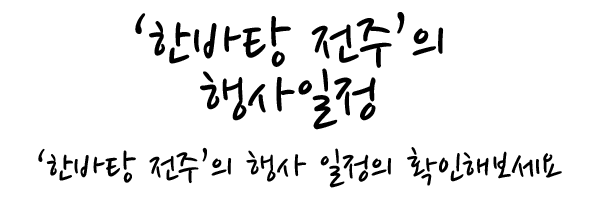
<style>
.page{position:relative;width:600px;height:200px;background:#ffffff}
.page>*{position:absolute;margin:0}
.t1{font:70px/55px "NanumPenOTF";color:#000000}
.t2{font:44px "NanumPenOTF";color:#000000}
</style>
<div class="page">
<p class="t1" style="left:135px;top:12px;width:309px;height:118px;text-align:center">‘한바탕 전주’의 <br>행사일정</p>
<p class="t2" style="left:38px;top:147px;width:524px;height:41px">‘한바탕 전주’의 행사 일정의 확인해보세요</p>
</div>
